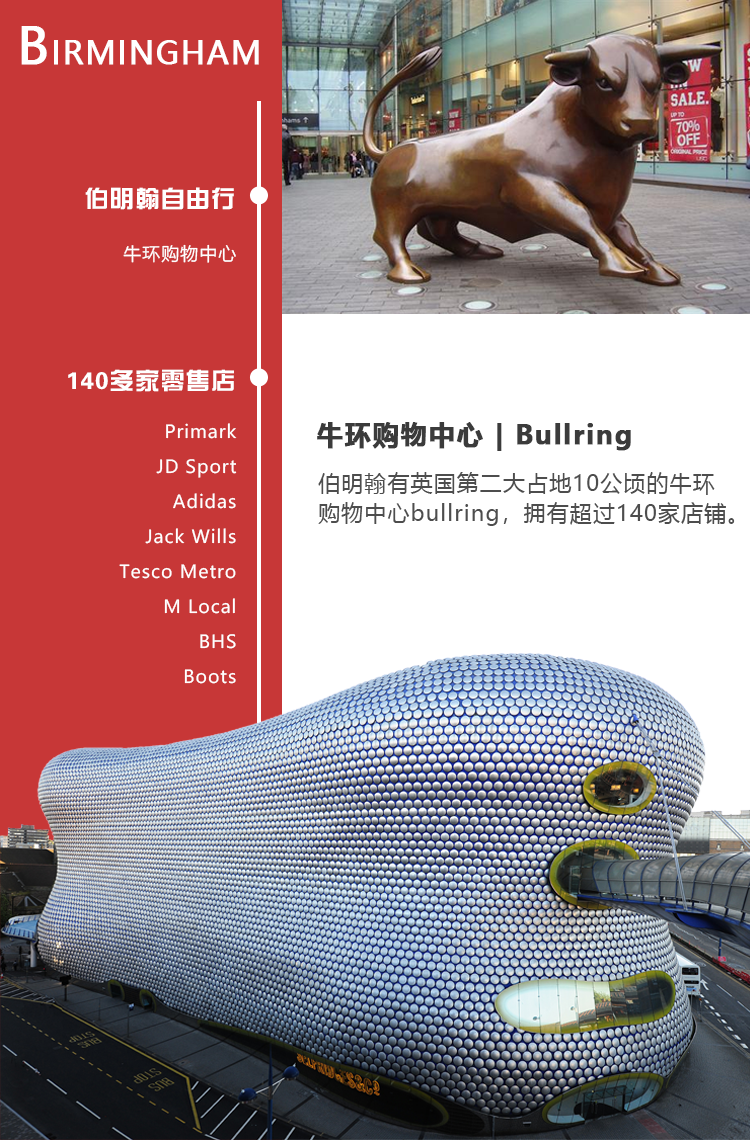
<style>
.page{position:relative;width:750px;height:1140px;background:#c73737}
.page>*{position:absolute;margin:0}
.t1{font:30.5px "MicrosoftYaHei";letter-spacing:0.05em;color:#ffffff;font-weight:bold}
.t2{font:48.8px "MicrosoftYaHei";letter-spacing:0.05em;color:#ffffff;font-weight:bold}
.t3{font:24px "FZZYJW--GB1-0";letter-spacing:0.05em;color:#ffffff}
.t4{font:18px "MicrosoftYaHei";letter-spacing:0.05em;color:#ffffff}
.t5{font:18px/35px "MicrosoftYaHei";letter-spacing:0.05em;color:#ffffff}
.t6{font:26px "MicrosoftYaHei-Bold";letter-spacing:0.05em;color:#3b3b3b;font-weight:bold}
.t7{font:22px/30px "MicrosoftYaHei";letter-spacing:0.05em;color:#4d4d4d}
</style>
<div class="page">
<p class="t1" style="left:21px;top:26px;width:238px;height:39px"><span class="t2">B</span>IRMINGHAM</p>
<p class="t3" style="left:85px;top:187px;width:149px;height:23px">伯明翰自由行</p>
<p class="t4" style="left:123px;top:244px;width:113px;height:19px">牛环购物中心</p>
<p class="t3" style="left:68px;top:369px;width:166px;height:23px">140多家零售店</p>
<p class="t5" style="left:119px;top:423px;width:118px;height:261px;text-align:right">Primark<br>JD Sport<br>Adidas<br>Jack Wills<br>Tesco Metro<br>M Local<br>BHS<br>Boots</p>
<p class="t6" style="left:317px;top:422px;width:314px;height:29px">牛环购物中心 | Bullring</p>
<p class="t7" style="left:318px;top:472px;width:417px;height:54px">伯明翰有英国第二大占地10公顷的牛环<br>购物中心bullring，拥有超过140家店铺。</p>
</div>
